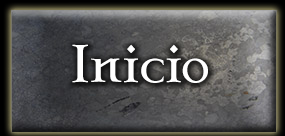
<style>
.page{position:relative;width:285px;height:136px}
.page>*{position:absolute;margin:0}
.t1{font:46.8px "CelticGaramondthe2nd";letter-spacing:0.02em;color:#ffffff;scale:0.93 1}
</style>
<div class="page">
<p class="t1" style="left:72px;top:44px;width:136px;height:39px">Inicio</p>
</div>
